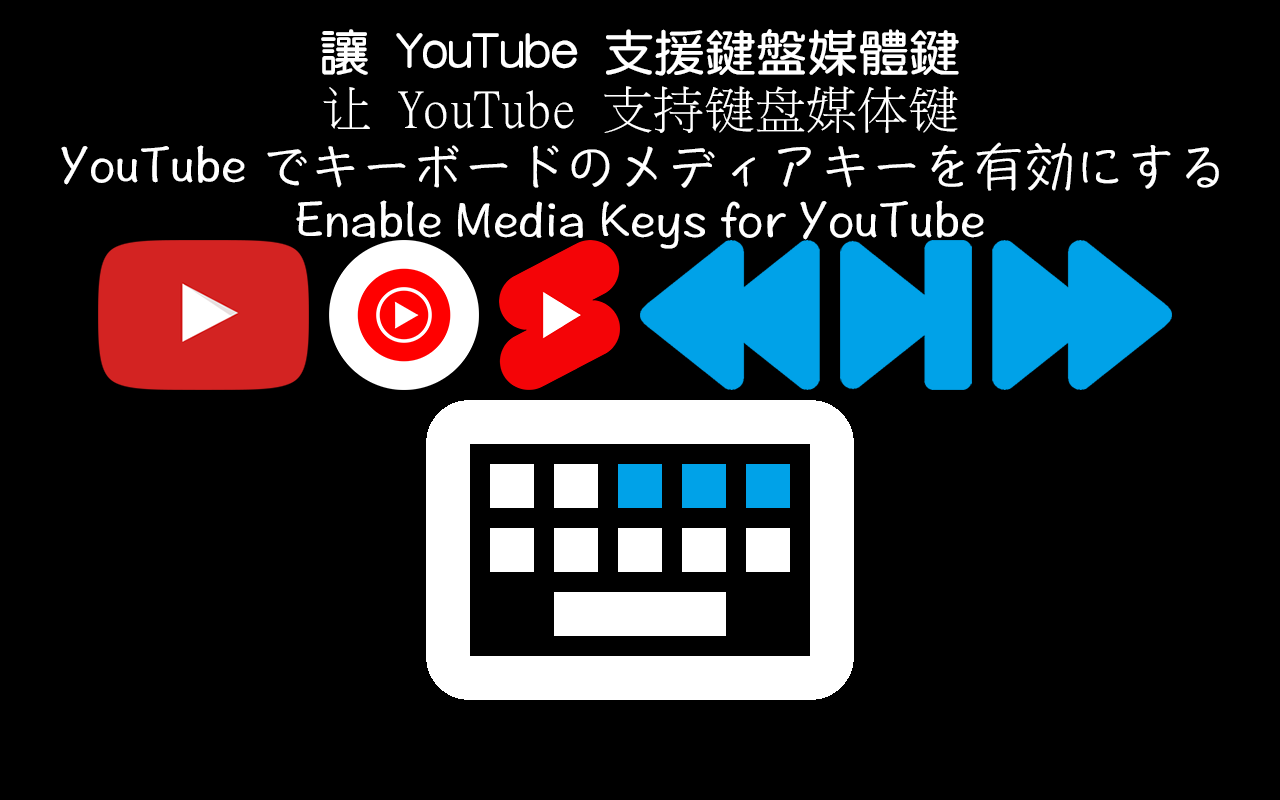
<style>
.page{position:relative;width:1280px;height:800px;background:#000000}
.page>*{position:absolute;margin:0}
.t1{font:51px "©M¥­²Ê¶ê";color:#ffffff}
.t2{font:51px "MingLiU";color:#ffffff}
.t3{font:51px "DFPHannotateW5-B5-TW";color:#ffffff}
</style>
<div class="page">
<p class="t1" style="left:321px;top:29px;width:638px;height:47px">讓 YouTube 支援鍵盤媒體鍵</p>
<p class="t2" style="left:323px;top:86px;width:635px;height:47px">让 YouTube 支持键盘媒体键</p>
<p class="t3" style="left:61px;top:142px;width:1158px;height:49px">YouTube でキーボードのメディアキーを有効にする</p>
<p class="t3" style="left:296px;top:200px;width:688px;height:49px">Enable Media Keys for YouTube</p>
</div>
